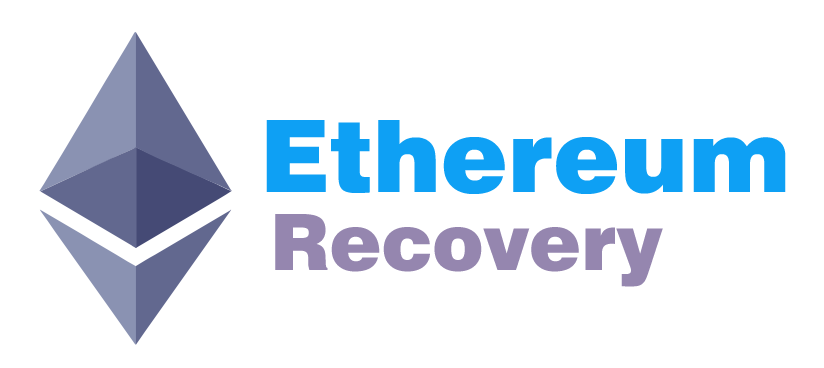
<style>
.page{position:relative;width:824px;height:368px;background:#ffffff}
.page>*{position:absolute;margin:0}
.t1{font:100px "Swiss721BT-Black";color:#0ea0f4}
.t2{font:78px "Swiss721BT-Black";color:#9586af}
</style>
<div class="page">
<p class="t1" style="left:266px;top:120px;width:520px;height:74px">Ethereum</p>
<p class="t2" style="left:275px;top:214px;width:388px;height:73px">Recovery</p>
</div>
